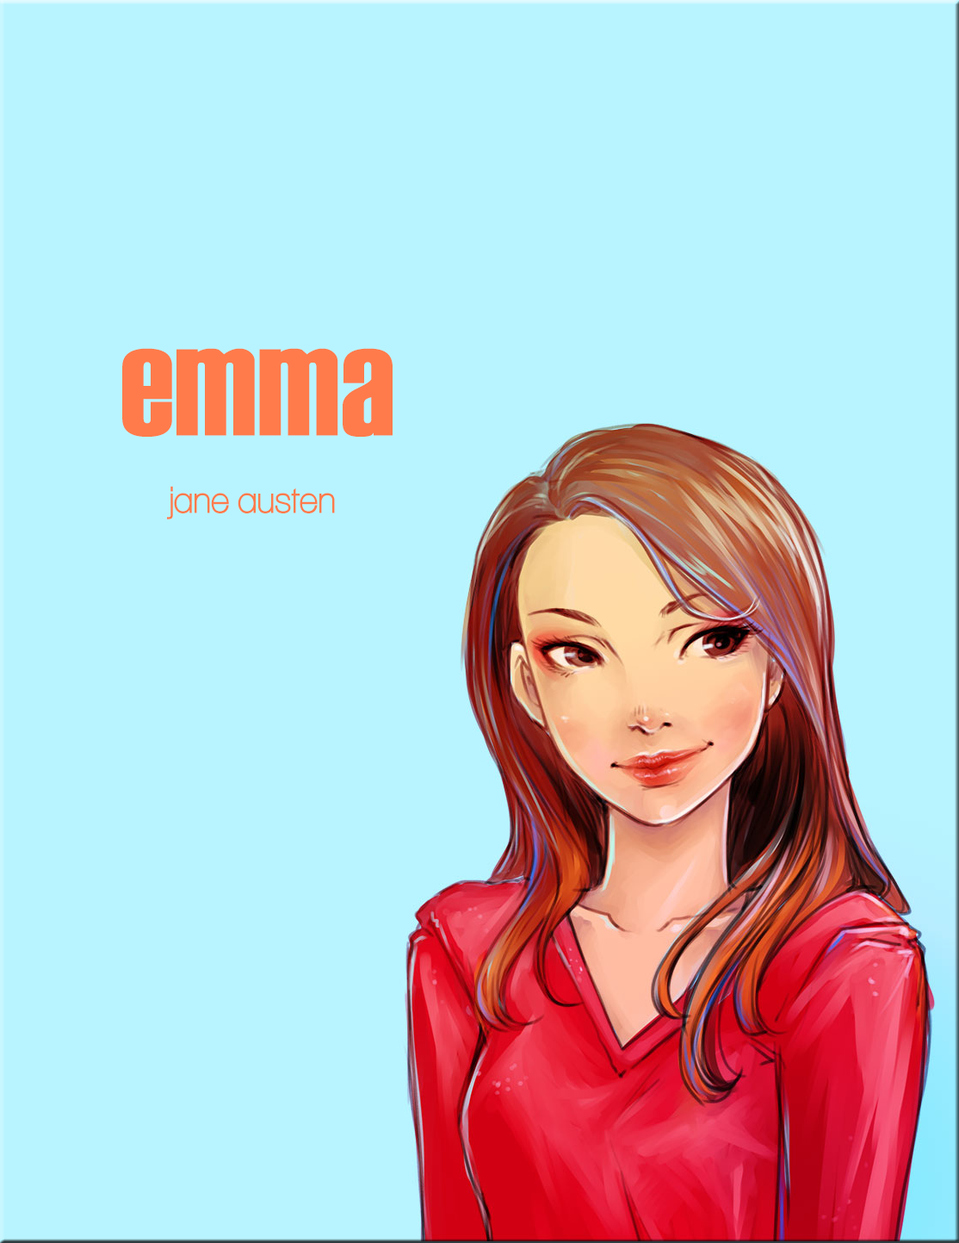
<style>
.page{position:relative;width:959px;height:1243px;background:#b8f4ff}
.page>*{position:absolute;margin:0}
.t1{font:152px "Haettenschweiler";color:#ff7b4b}
.t2{font:37.4px "Aliquam";color:#ff7b4b}
</style>
<div class="page">
<p class="t1" style="left:122px;top:348px;width:271px;height:89px">emma</p>
<p class="t2" style="left:167px;top:486px;width:168px;height:33px">jane austen</p>
</div>
